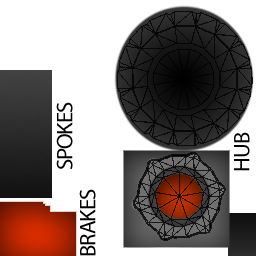
<style>
.page{position:relative;width:256px;height:256px;background:#ffffff}
.page>*{position:absolute;margin:0}
.t1{font:22.7px "MyriadPro-Regular";letter-spacing:-0.04em;color:#000000;text-transform:uppercase}
</style>
<div class="page">
<p class="t1" style="left:56px;top:102px;width:17px;height:67px;rotate:-90deg">SPokes</p>
<p class="t1" style="left:234px;top:132px;width:16px;height:39px;rotate:-90deg">HUB</p>
<p class="t1" style="left:79px;top:189px;width:17px;height:67px;rotate:-90deg">Brakes</p>
</div>
